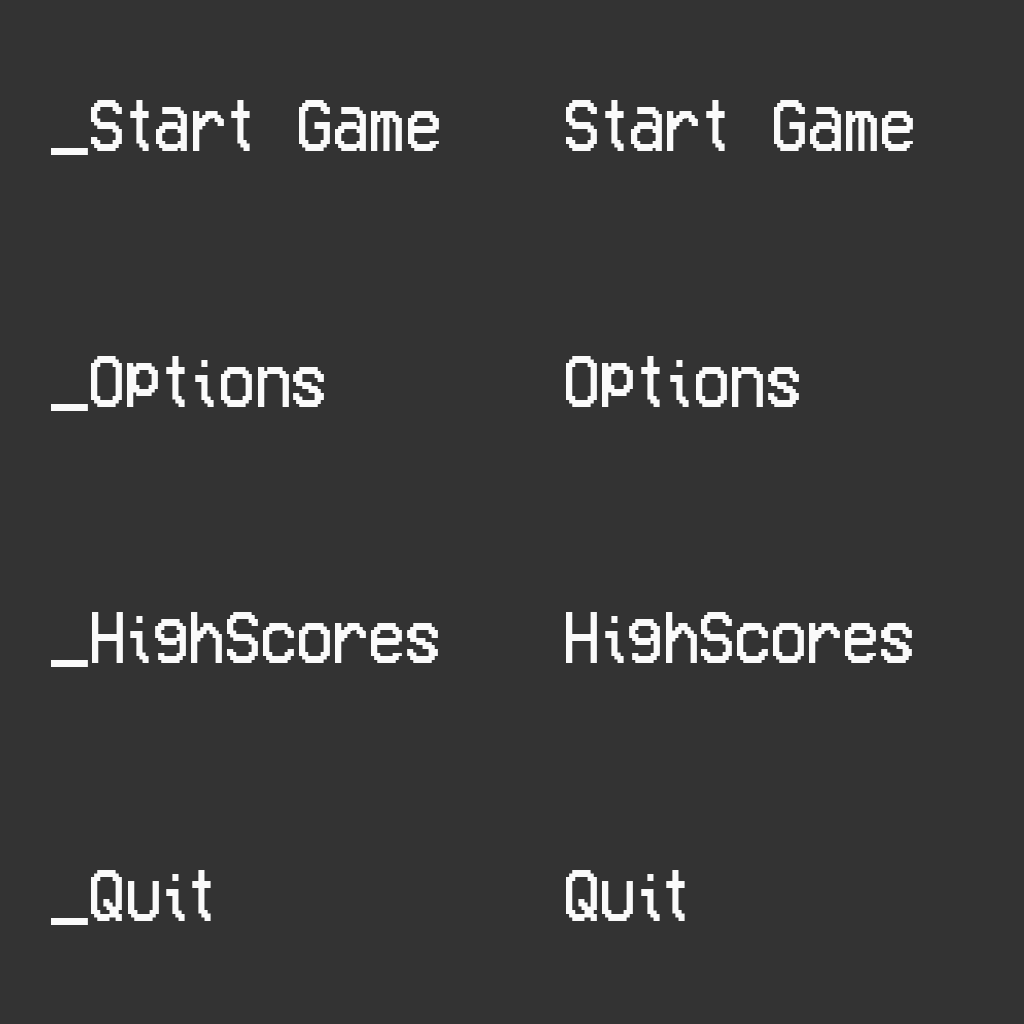
<style>
.page{position:relative;width:1024px;height:1024px;background:#333333}
.page>*{position:absolute;margin:0}
.t1{font:75.3px "VCROSDMono";color:#fafafa;scale:0.84 1}
.t2{font:75px "VCROSDMono";color:#fafafa;scale:0.84 1}
</style>
<div class="page">
<p class="t1" style="left:51px;top:100px;width:388px;height:55px">_Start Game</p>
<p class="t1" style="left:566px;top:100px;width:347px;height:51px">Start Game</p>
<p class="t1" style="left:51px;top:356px;width:273px;height:55px">_Options<br>t</p>
<p class="t1" style="left:566px;top:356px;width:233px;height:51px">Options</p>
<p class="t1" style="left:51px;top:612px;width:387px;height:55px">_HighScores<br>t</p>
<p class="t1" style="left:566px;top:612px;width:346px;height:51px">HighScores</p>
<p class="t2" style="left:51px;top:870px;width:160px;height:55px">_Quit</p>
<p class="t2" style="left:566px;top:870px;width:119px;height:51px">Quit</p>
</div>
